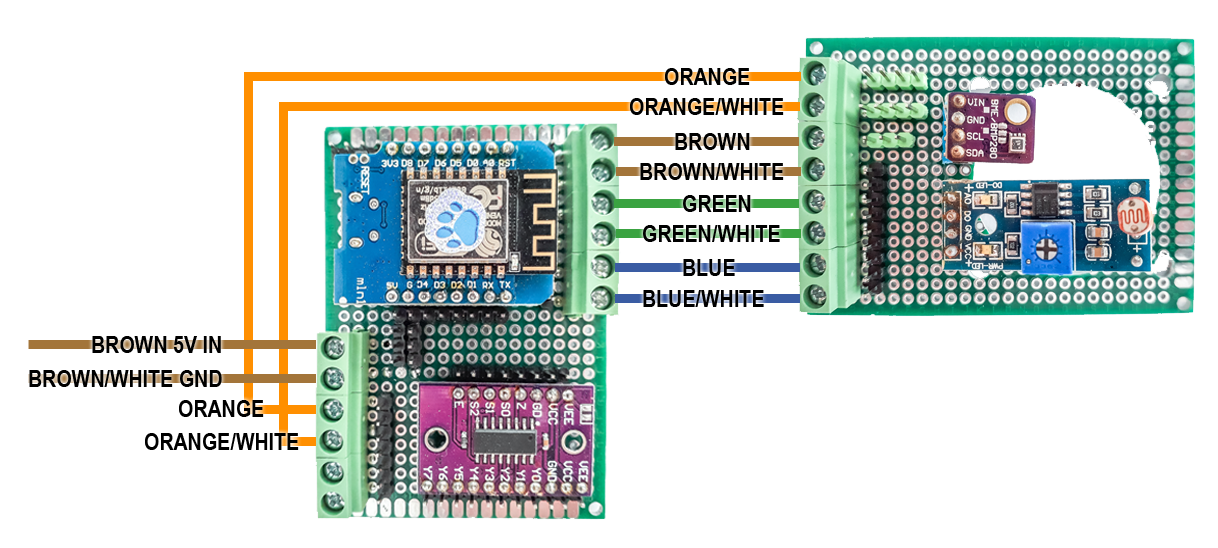
<style>
.page{position:relative;width:1218px;height:548px;background:#ffffff}
.page>*{position:absolute;margin:0}
.t1{font:24px "ArialNarrow-Bold";color:#000000}
</style>
<div class="page">
<p class="t1" style="left:665px;top:68px;width:85px;height:17px">ORANGE</p>
<p class="t1" style="left:630px;top:98px;width:154px;height:17px">ORANGE/WHITE</p>
<p class="t1" style="left:675px;top:133px;width:75px;height:17px">BROWN</p>
<p class="t1" style="left:640px;top:163px;width:144px;height:17px">BROWN/WHITE</p>
<p class="t1" style="left:683px;top:195px;width:68px;height:17px">GREEN</p>
<p class="t1" style="left:643px;top:225px;width:137px;height:17px">GREEN/WHITE</p>
<p class="t1" style="left:683px;top:259px;width:52px;height:17px">BLUE</p>
<p class="t1" style="left:643px;top:290px;width:121px;height:17px">BLUE/WHITE</p>
<p class="t1" style="left:92px;top:336px;width:129px;height:17px">BROWN 5V IN</p>
<p class="t1" style="left:29px;top:370px;width:193px;height:17px">BROWN/WHITE GND</p>
<p class="t1" style="left:179px;top:400px;width:85px;height:17px">ORANGE</p>
<p class="t1" style="left:145px;top:433px;width:154px;height:17px">ORANGE/WHITE</p>
</div>
